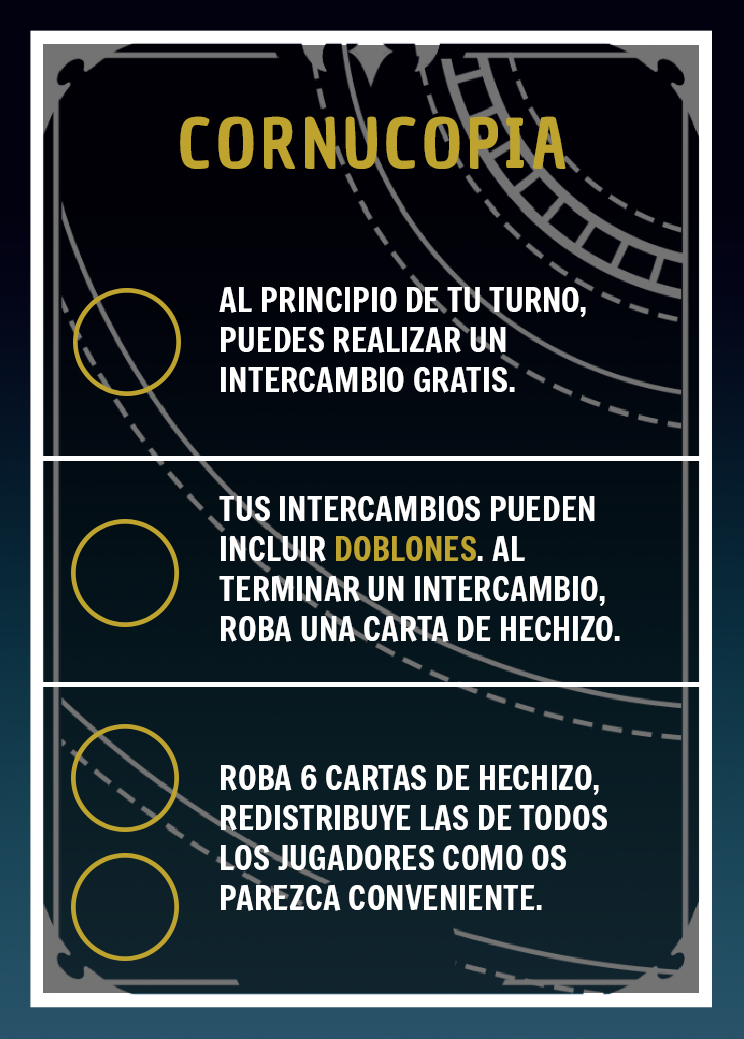
<style>
.page{position:relative;width:744px;height:1039px}
.page>*{position:absolute;margin:0}
.t1{font:66.7px "ChauPhilomeneOne-Regular";letter-spacing:0.075em;color:#bea42f}
.t2{font:33.3px "Freeman-Regular";color:#ffffff}
.t3{font:33.3px "Freeman-Regular";color:#bea42f}
</style>
<div class="page">
<p class="t1" style="left:180px;top:116px;width:386px;height:53px">CORNUCOPIA</p>
<p class="t2" style="left:219px;top:286px;width:367px;height:107px">AL PRINCIPIO DE TU TURNO, PUEDES REALIZAR UN INTERCAMBIO GRATIS.</p>
<p class="t2" style="left:219px;top:495px;width:401px;height:147px">TUS INTERCAMBIOS PUEDEN INCLUIR <span class="t3">DOBLONES</span>. AL TERMINAR UN INTERCAMBIO, ROBA UNA CARTA DE HECHIZO.</p>
<p class="t2" style="left:221px;top:764px;width:386px;height:147px">ROBA 6 CARTAS DE HECHIZO, REDISTRIBUYE LAS DE TODOS LOS JUGADORES COMO OS PAREZCA CONVENIENTE.</p>
</div>
